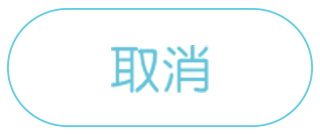
<style>
.page{position:relative;width:320px;height:135px;background:#ffffff}
.page>*{position:absolute;margin:0}
.t1{font:51px "DFYuan-Md-HK-BF";color:#64c4d9}
</style>
<div class="page">
<p class="t1" style="left:111px;top:45px;width:98px;height:48px">取消</p>
</div>
